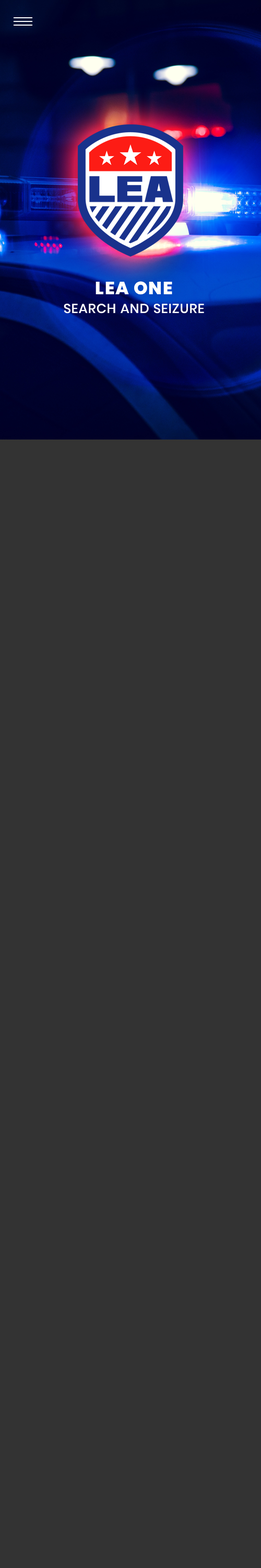
<style>
.page{position:relative;width:261px;height:1568px;background:#333333}
.page>*{position:absolute;margin:0}
.t1{font:13.1px/18.8px "Poppins-Medium";letter-spacing:0.04em;color:#ffffff;text-transform:uppercase}
.t2{font:17.8px/18.8px "Poppins-ExtraBold";letter-spacing:0.04em;color:#ffffff;text-transform:uppercase}
</style>
<div class="page">
<p class="t1" style="left:64px;top:281px;width:140px;height:33px;text-align:center"><span class="t2">LEA ONE<br></span>Search and Seizure</p>
</div>
